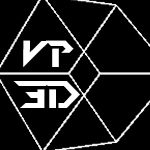
<style>
.page{position:relative;width:150px;height:150px;background:#000000}
.page>*{position:absolute;margin:0}
.t1{font:37.5px "PerfectDark(BRK)";letter-spacing:0.125em;color:#ffffff}
</style>
<div class="page">
<p class="t1" style="left:23px;top:40px;width:51px;height:27px">VP</p>
<p class="t1" style="left:13px;top:81px;width:67px;height:27px">3D</p>
</div>
